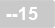
<style>
.page{position:relative;width:55px;height:28px;background:#c9c9c9}
.page>*{position:absolute;margin:0}
.t1{font:18.2px "Arial-BoldMT";color:#ffffff}
</style>
<div class="page">
<p class="t1" style="left:6px;top:7px;width:32px;height:13px">--15</p>
</div>
